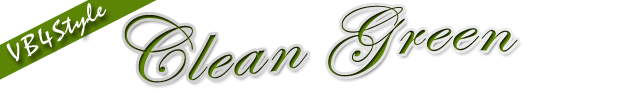
<style>
.page{position:relative;width:622px;height:94px;background:#ffffff}
.page>*{position:absolute;margin:0}
.t1{font:79.2px "EdwardianScriptITC";letter-spacing:0.05em;scale:1.12 1}
</style>
<div class="page">
<p class="t1" style="left:124px;top:5px;width:394px;height:78px">Clean Green</p>
</div>
